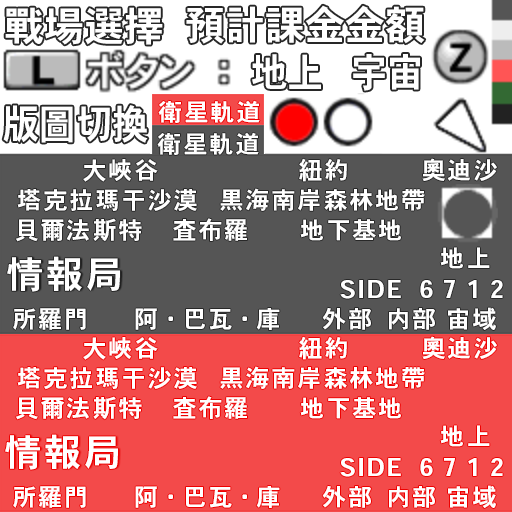
<style>
.page{position:relative;width:512px;height:512px;background:#f34a4a}
.page>*{position:absolute;margin:0}
.t1{font:40px "HeiseiKakuGoStd-W7";color:#ffffff}
.t2{font:40px "HeiseiKakuGoStd-W7";color:#ffffff;scale:0.91 1}
.t3{font:24px "HeiseiKakuGoStd-W7";letter-spacing:0.08em;color:#ffffff}
.t4{font:37px "HeiseiKakuGoStd-W7";letter-spacing:0.08em;color:#ffffff}
.t5{font:24px "HeiseiKakuGoStd-W7";letter-spacing:0.055em;color:#ffffff}
.t6{font:24px "HeiseiKakuGoStd-W7";color:#ffffff}
.t7{font:24px "HeiseiKakuGoStd-W7";letter-spacing:0.1em;color:#ffffff}
</style>
<div class="page">
<p class="t1" style="left:186px;top:5px;width:239px;height:39px">預計課金金額</p>
<p class="t1" style="left:5px;top:7px;width:158px;height:38px">戰場選擇</p>
<p class="t2" style="left:252px;top:54px;width:69px;height:35px">地上</p>
<p class="t2" style="left:353px;top:54px;width:67px;height:37px">宇宙</p>
<p class="t3" style="left:158px;top:100px;width:102px;height:23px">衛星軌道</p>
<p class="t2" style="left:3px;top:105px;width:145px;height:38px">版圖切換</p>
<p class="t3" style="left:157px;top:132px;width:102px;height:23px">衛星軌道</p>
<p class="t3" style="left:83px;top:159px;width:75px;height:23px">大峽谷</p>
<p class="t3" style="left:299px;top:158px;width:48px;height:24px">紐約</p>
<p class="t3" style="left:422px;top:158px;width:75px;height:23px">奧迪沙</p>
<p class="t3" style="left:17px;top:189px;width:180px;height:23px">塔克拉瑪干沙漠</p>
<p class="t3" style="left:220px;top:188px;width:205px;height:23px">黒海南岸森林地帶</p>
<p class="t3" style="left:15px;top:218px;width:127px;height:24px">貝爾法斯特</p>
<p class="t3" style="left:173px;top:218px;width:74px;height:23px">査布羅</p>
<p class="t3" style="left:300px;top:219px;width:102px;height:22px">地下基地</p>
<p class="t4" style="left:7px;top:256px;width:113px;height:36px">情報局</p>
<p class="t3" style="left:440px;top:247px;width:50px;height:22px">地上</p>
<p class="t3" style="left:340px;top:280px;width:61px;height:19px">SIDE</p>
<p class="t5" style="left:420px;top:280px;width:83px;height:18px">6 7 1 2</p>
<p class="t3" style="left:13px;top:308px;width:73px;height:22px">所羅門</p>
<p class="t6" style="left:135px;top:308px;width:145px;height:22px">阿・<span class="t3">巴</span>瓦・<span class="t7">庫</span></p>
<p class="t3" style="left:322px;top:307px;width:49px;height:23px">外部</p>
<p class="t3" style="left:389px;top:308px;width:46px;height:22px">内部</p>
<p class="t3" style="left:448px;top:307px;width:48px;height:23px">宙域</p>
<p class="t3" style="left:83px;top:337px;width:75px;height:23px">大峽谷</p>
<p class="t3" style="left:299px;top:336px;width:48px;height:24px">紐約</p>
<p class="t3" style="left:422px;top:336px;width:75px;height:23px">奧迪沙</p>
<p class="t3" style="left:220px;top:366px;width:205px;height:23px">黒海南岸森林地帶</p>
<p class="t3" style="left:17px;top:367px;width:180px;height:23px">塔克拉瑪干沙漠</p>
<p class="t3" style="left:15px;top:396px;width:127px;height:24px">貝爾法斯特</p>
<p class="t3" style="left:173px;top:396px;width:74px;height:23px">査布羅</p>
<p class="t3" style="left:300px;top:397px;width:102px;height:22px">地下基地</p>
<p class="t3" style="left:440px;top:425px;width:50px;height:22px">地上</p>
<p class="t4" style="left:5px;top:434px;width:113px;height:36px">情報局</p>
<p class="t3" style="left:340px;top:458px;width:61px;height:19px">SIDE</p>
<p class="t5" style="left:420px;top:458px;width:83px;height:18px">6 7 1 2</p>
<p class="t3" style="left:13px;top:486px;width:73px;height:22px">所羅門</p>
<p class="t6" style="left:135px;top:486px;width:145px;height:22px">阿・<span class="t3">巴</span>瓦・<span class="t7">庫</span></p>
<p class="t3" style="left:322px;top:485px;width:49px;height:23px">外部</p>
<p class="t3" style="left:389px;top:486px;width:46px;height:22px">内部</p>
<p class="t3" style="left:448px;top:485px;width:48px;height:23px">宙域</p>
</div>
